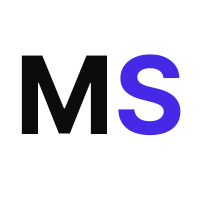
<style>
.page{position:relative;width:200px;height:200px;background:#ffffff}
.page>*{position:absolute;margin:0}
.t1{font:108.3px "Inter-Bold";color:#0b0d0d}
.t2{font:108.3px "Inter-Bold";color:#4529e6}
</style>
<div class="page">
<p class="t1" style="left:21px;top:54px;width:160px;height:82px">M<span class="t2">S</span></p>
</div>
